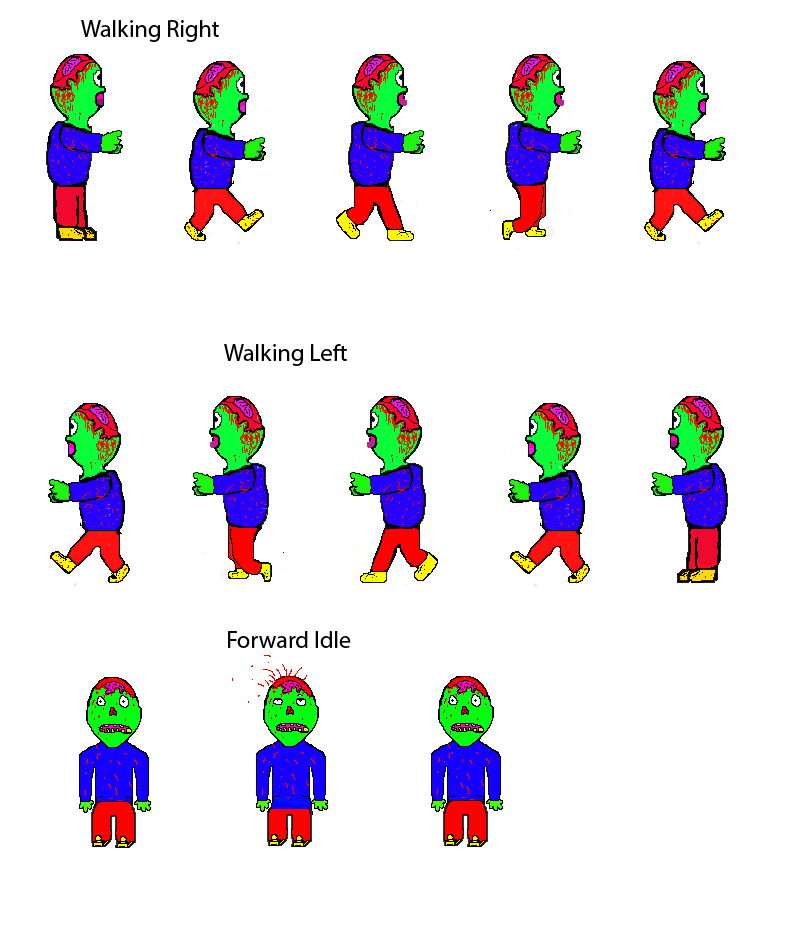
<style>
.page{position:relative;width:800px;height:950px;background:#ffffff}
.page>*{position:absolute;margin:0}
.t1{font:24px "MyriadPro-Regular";color:#000000}
</style>
<div class="page">
<p class="t1" style="left:81px;top:20px;width:138px;height:22px">Walking Right</p>
<p class="t1" style="left:228px;top:631px;width:123px;height:17px">Forward Idle</p>
</div>
